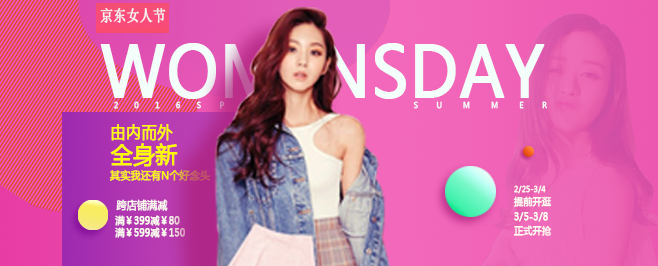
<style>
.page{position:relative;width:658px;height:266px}
.page>*{position:absolute;margin:0}
.t1{font:15.9px "NSimSun";color:#f3f5f4;font-weight:bold;scale:0.81 1}
.t2{font:70.1px "MicrosoftYaHei";color:#f3fefa;font-weight:bold;scale:0.9 1}
.t3{font:8px "MicrosoftYaHei";color:#f3fefa;font-weight:bold;scale:0.9 1}
.t4{font:17px "MicrosoftYaHei";color:#fffb03;font-weight:bold;scale:0.9 1}
.t5{font:24.3px "MicrosoftYaHei";color:#fffb03;font-weight:bold;scale:0.9 1}
.t6{font:10.8px "MicrosoftYaHei";color:#fffb03;font-weight:bold;scale:0.92 1}
.t7{font:8px "MicrosoftYaHei";color:#fcfcf0;font-weight:bold;scale:0.9 1}
.t8{font:10px "MicrosoftYaHei";color:#fcfcf0;font-weight:bold;scale:0.9 1}
.t9{font:11px "MicrosoftYaHei";color:#fcfcf0;font-weight:bold;scale:0.9 1}
</style>
<div class="page">
<p class="t1" style="left:100px;top:7px;width:66px;height:16px">京东女人节</p>
<p class="t2" style="left:100px;top:43px;width:445px;height:56px">WOMENSDAY</p>
<p class="t3" style="left:114px;top:101px;width:152px;height:8px">2       0       1       6       S        P       L       A</p>
<p class="t3" style="left:413px;top:101px;width:134px;height:8px">S        U         M         M         E        R</p>
<p class="t4" style="left:111px;top:124px;width:62px;height:17px">由内而外</p>
<p class="t5" style="left:110px;top:143px;width:68px;height:24px">全身新</p>
<p class="t6" style="left:109px;top:169px;width:102px;height:12px">其实我还有N个好念头</p>
<p class="t7" style="left:514px;top:185px;width:32px;height:9px">2/25-3/4</p>
<p class="t8" style="left:513px;top:196px;width:39px;height:11px">提前开逛</p>
<p class="t9" style="left:116px;top:199px;width:52px;height:12px">跨店铺满减</p>
<p class="t8" style="left:115px;top:215px;width:65px;height:11px">满￥399减￥80</p>
<p class="t8" style="left:514px;top:212px;width:34px;height:10px">3/5-3/8</p>
<p class="t8" style="left:115px;top:227px;width:70px;height:11px">满￥599减￥150</p>
<p class="t8" style="left:514px;top:225px;width:38px;height:11px">正式开抢</p>
</div>
